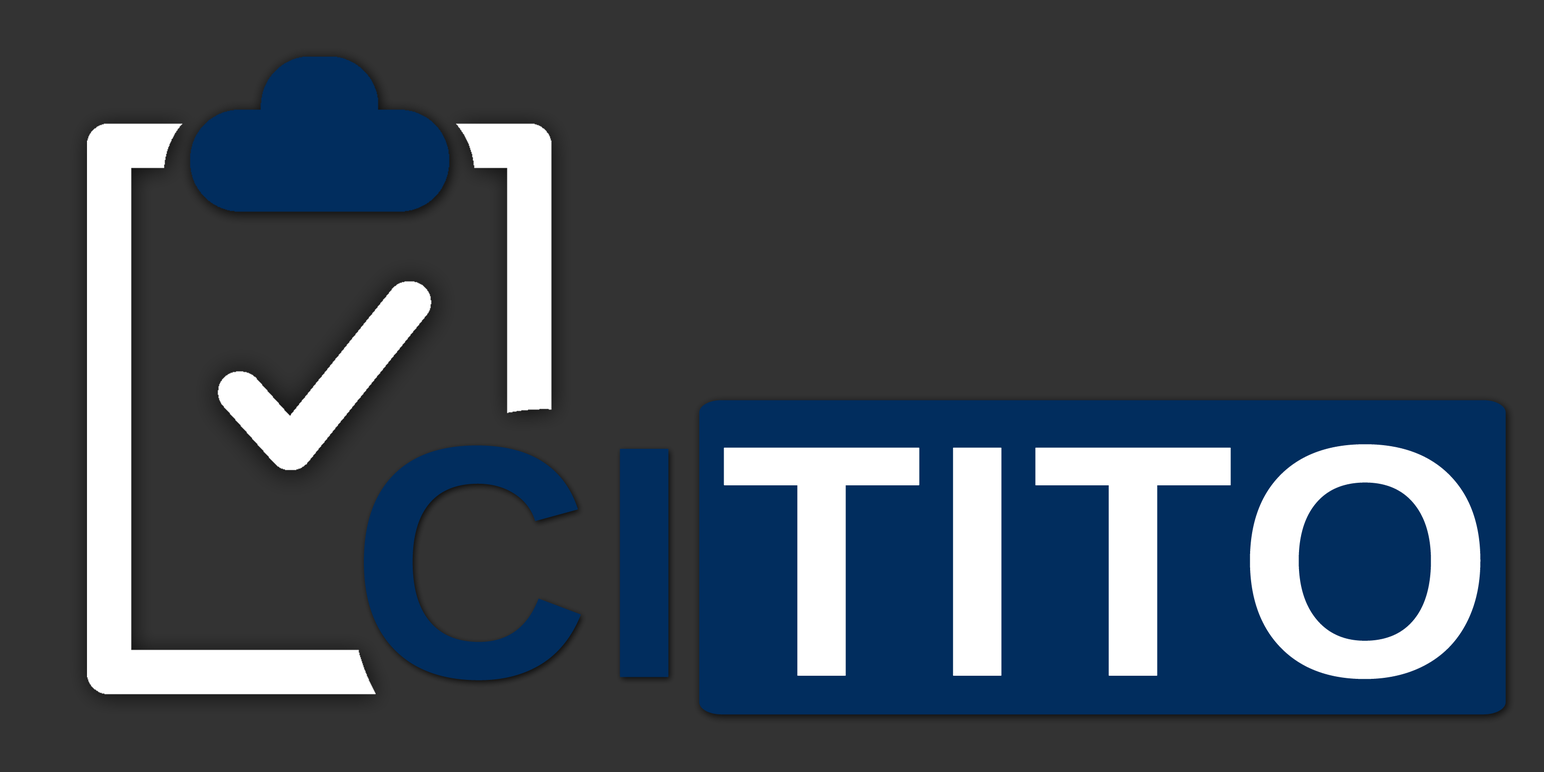
<style>
.page{position:relative;width:1544px;height:772px;background:#333333}
.page>*{position:absolute;margin:0}
.t1{font:330.5px "LiberationSans-Bold";color:#012d5e;font-weight:bold}
.t2{font:330.5px "LiberationSans-Bold";color:#ffffff;font-weight:bold}
</style>
<div class="page">
<p class="t1" style="left:364px;top:445px;width:305px;height:236px">CI</p>
<p class="t2" style="left:724px;top:444px;width:757px;height:235px">TITO</p>
</div>
